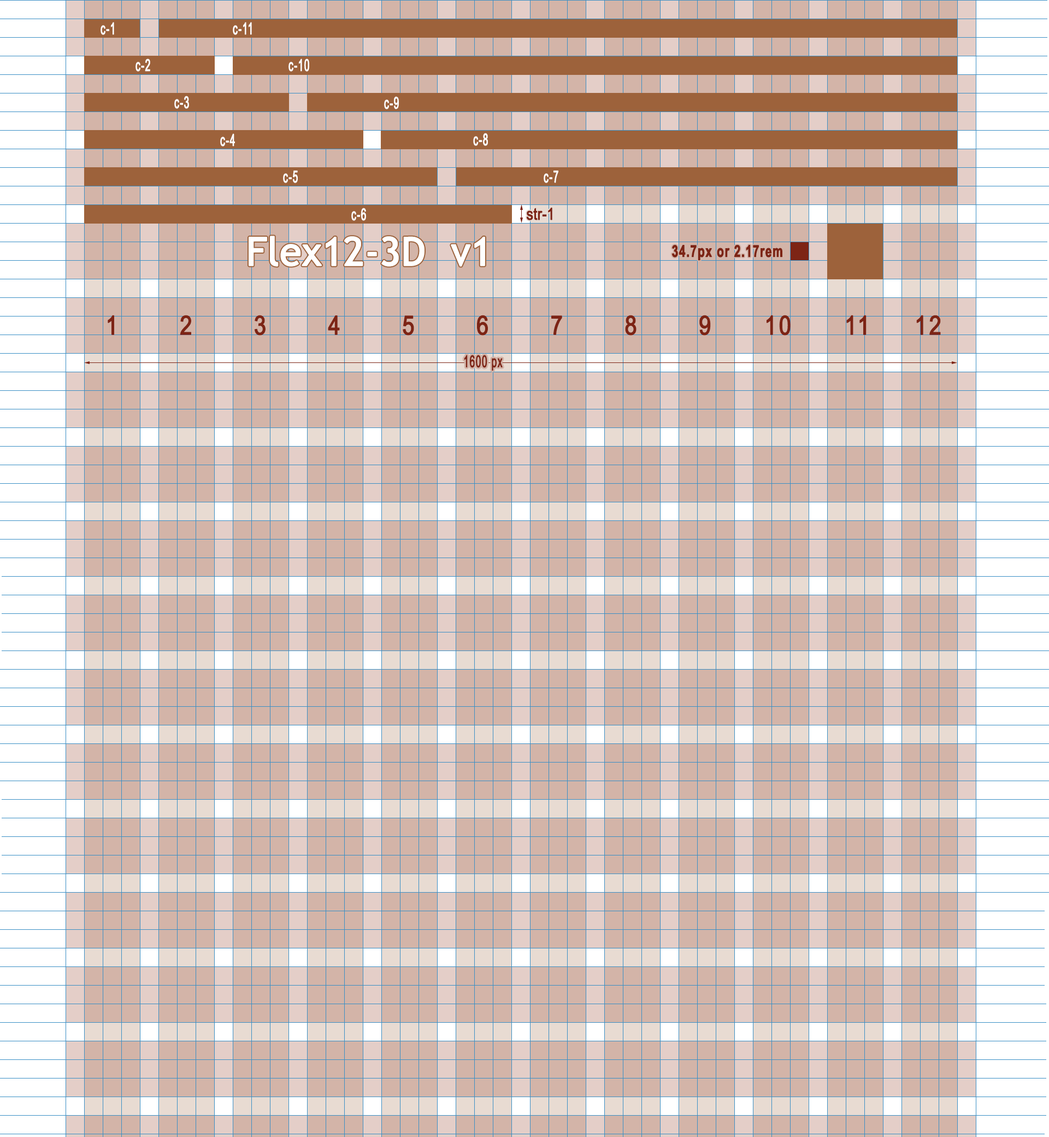
<style>
.page{position:relative;width:1049px;height:1137px;background:#d3b4a8}
.page>*{position:absolute;margin:0}
.t1{font:16.4px "ArialNarrow";letter-spacing:0.05em;color:#ffffff;font-weight:bold;scale:0.7 1}
.t2{font:16.4px "ArialNarrow";letter-spacing:-0.01em;color:#7d2415;font-weight:bold}
.t3{font:39.3px "TrebuchetMS";letter-spacing:-0.01em;color:#ffffff;font-weight:bold}
.t4{font:16.4px "Arial-BoldMT";letter-spacing:0.05em;color:#7d2415;font-weight:bold;scale:0.7 1}
.t5{font:26.2px "ArialNarrow";letter-spacing:0.07em;color:#7d2415;font-weight:bold}
.t6{font:16.4px "ArialNarrow";letter-spacing:0.05em;color:#7d2415;font-weight:bold;scale:0.7 1}
</style>
<div class="page">
<p class="t1" style="left:101px;top:22px;width:13px;height:13px">c-1</p>
<p class="t1" style="left:233px;top:22px;width:19px;height:13px">c-11</p>
<p class="t1" style="left:136px;top:58px;width:14px;height:14px">c-2</p>
<p class="t1" style="left:289px;top:58px;width:20px;height:14px">c-10</p>
<p class="t1" style="left:174px;top:96px;width:15px;height:13px">c-3</p>
<p class="t1" style="left:384px;top:96px;width:15px;height:13px">c-9</p>
<p class="t1" style="left:220px;top:133px;width:15px;height:13px">c-4</p>
<p class="t1" style="left:473px;top:133px;width:15px;height:13px">c-8</p>
<p class="t1" style="left:283px;top:170px;width:15px;height:13px">c-5</p>
<p class="t1" style="left:544px;top:170px;width:14px;height:13px">c-7</p>
<p class="t1" style="left:351px;top:208px;width:15px;height:13px">c-6</p>
<p class="t2" style="left:526px;top:207px;width:26px;height:13px">str-1</p>
<p class="t3" style="left:249px;top:236px;width:236px;height:31px">Flex12-3D  v1</p>
<p class="t4" style="left:672px;top:245px;width:110px;height:16px">34.7px or 2.17rem</p>
<p class="t5" style="left:108px;top:315px;width:833px;height:21px">1       2       3       4       5       6       7       8       9      10      11     12</p>
<p class="t6" style="left:464px;top:355px;width:39px;height:15px">1600 px</p>
</div>
